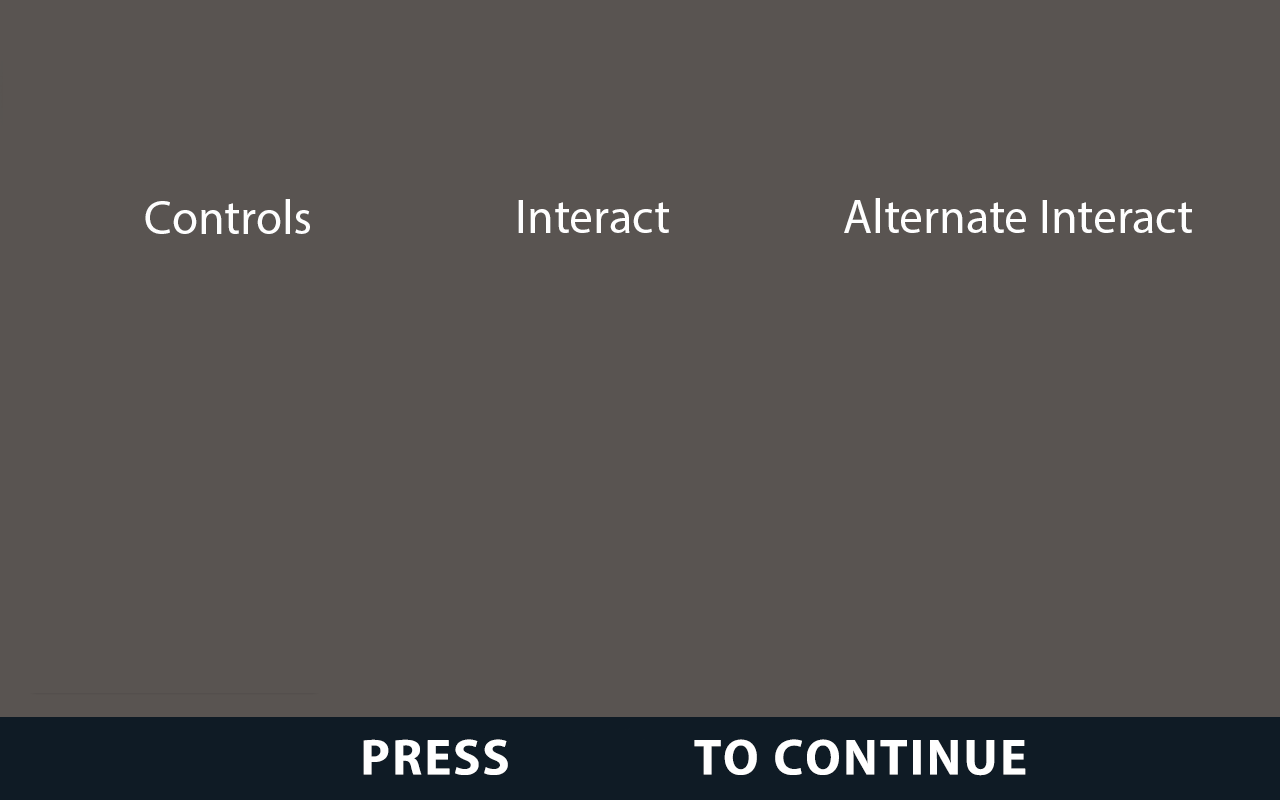
<style>
.page{position:relative;width:1280px;height:800px;background:#595451}
.page>*{position:absolute;margin:0}
.t1{font:48px "MyriadPro-Regular";color:#fefefe}
</style>
<div class="page">
<p class="t1" style="left:518px;top:198px;width:674px;height:35px">Interact                 Alternate Interact</p>
<p class="t1" style="left:145px;top:199px;width:165px;height:35px">Controls</p>
</div>
